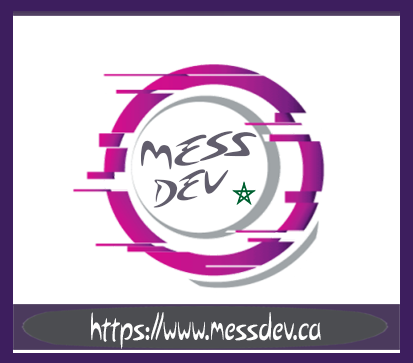
<style>
.page{position:relative;width:413px;height:363px;background:#ffffff}
.page>*{position:absolute;margin:0}
.t1{font:35.6px/38.1px "Arabolical1";color:#64606e;scale:0.72 1}
.t2{font:33.6px "Arabolical1";color:#fefefe;scale:0.64 1}
</style>
<div class="page">
<p class="t1" style="left:141px;top:131px;width:116px;height:77px;text-align:center;rotate:10deg">MESS<br>DEV</p>
<p class="t2" style="left:91px;top:312px;width:230px;height:37px">https://www.messdev.ca</p>
</div>
